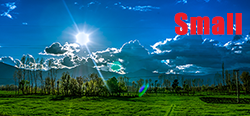
<style>
.page{position:relative;width:250px;height:116px}
.page>*{position:absolute;margin:0}
.t1{font:26.7px "Impact";letter-spacing:0.025em;color:#ed1c24;font-weight:bold}
</style>
<div class="page">
<p class="t1" style="left:174px;top:12px;width:68px;height:23px">Small</p>
</div>
